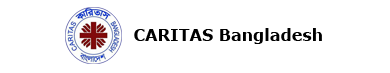
<style>
.page{position:relative;width:390px;height:73px;background:#ffffff}
.page>*{position:absolute;margin:0}
.t1{font:16px "Verdana-Bold";color:#000000}
</style>
<div class="page">
<p class="t1" style="left:134px;top:28px;width:188px;height:16px">CARITAS Bangladesh</p>
</div>
